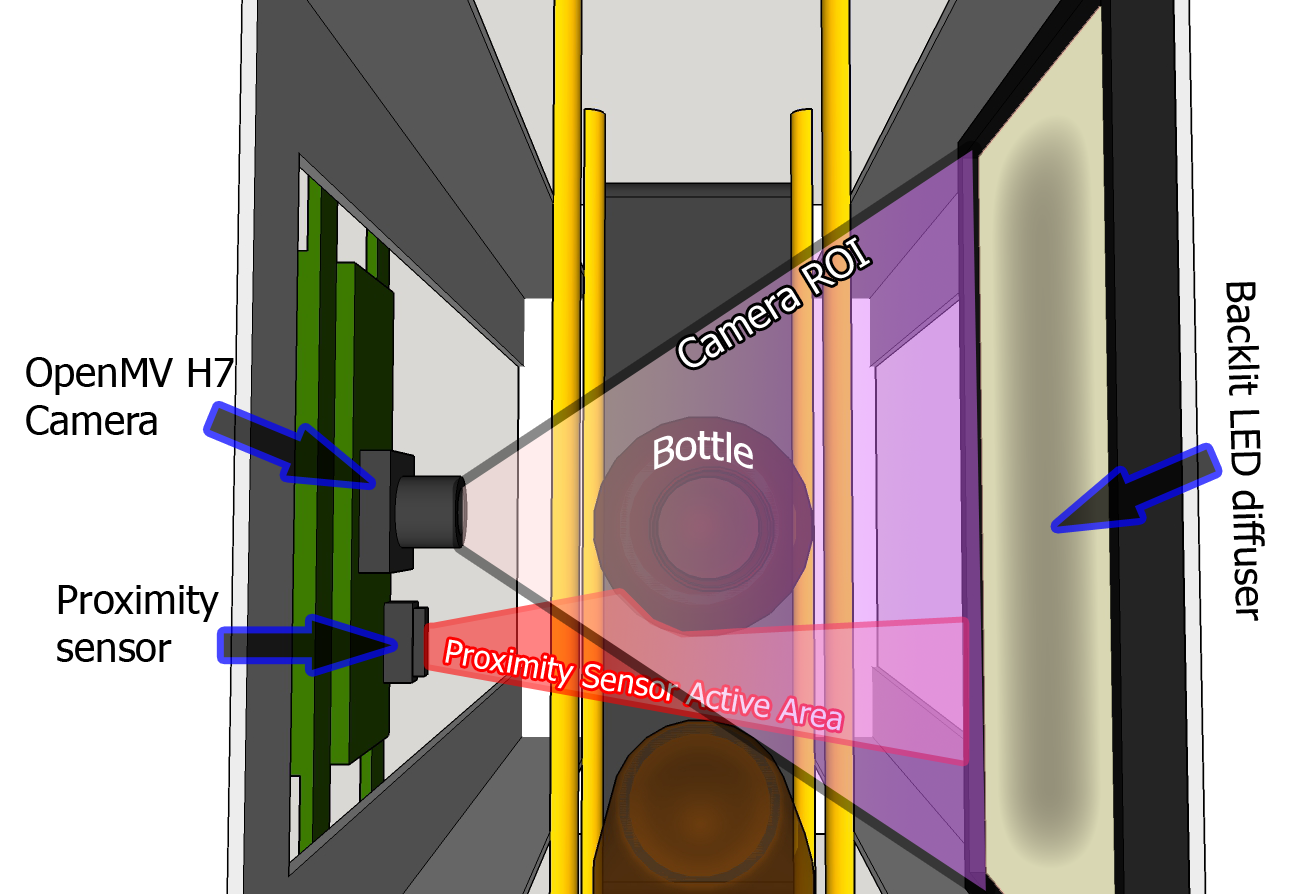
<style>
.page{position:relative;width:1303px;height:894px;background:#ffffff}
.page>*{position:absolute;margin:0}
.t1{font:40px "Tahoma";color:#ffffff}
.t2{font:40px "Tahoma";color:#000000}
.t3{font:32px "Tahoma"}
</style>
<div class="page">
<p class="t1" style="left:678px;top:237px;width:193px;height:131px;rotate:-31deg">Camera ROI</p>
<p class="t2" style="left:1226px;top:282px;width:39px;height:339px;rotate:88deg">Backlit LED diffuser</p>
<p class="t2" style="left:26px;top:357px;width:208px;height:78px">OpenMV H7<br>Camera</p>
<p class="t1" style="left:654px;top:431px;width:99px;height:39px">Bottle</p>
<p class="t2" style="left:57px;top:585px;width:162px;height:77px">Proximity<br>sensor</p>
<p class="t3" style="left:445px;top:639px;width:397px;height:92px;rotate:10deg">Proximity Sensor Active Area</p>
</div>
